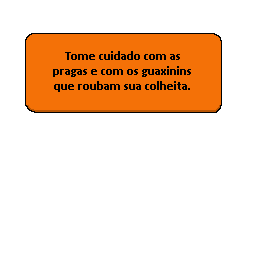
<style>
.page{position:relative;width:256px;height:256px;background:#ffffff}
.page>*{position:absolute;margin:0}
.t1{font:12.5px "Calibri-Bold";color:#000000}
</style>
<div class="page">
<p class="t1" style="left:53px;top:51px;width:138px;height:41px;text-align:center">Tome cuidado com as pragas e com os guaxinins que roubam sua colheita.</p>
</div>
